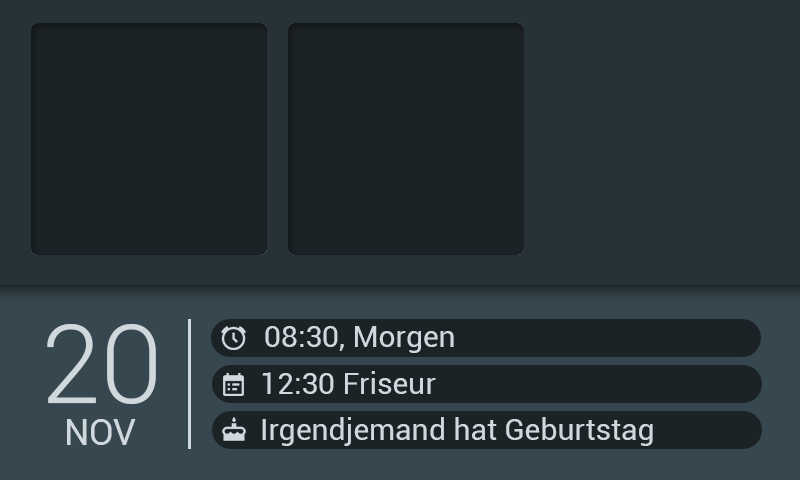
<style>
.page{position:relative;width:800px;height:480px;background:#1c2327}
.page>*{position:absolute;margin:0}
.t1{font:110px "Roboto-Light";color:#cfd8dc}
.t2{font:30px "Roboto-Regular";color:#cfd8dc}
.t3{font:36px "Roboto-Regular";color:#cfd8dc}
</style>
<div class="page">
<p class="t1" style="left:47px;top:324px;width:109px;height:80px">20</p>
<p class="t2" style="left:265px;top:326px;width:189px;height:27px">08:30, Morgen</p>
<p class="t2" style="left:262px;top:371px;width:174px;height:23px">12:30 Friseur</p>
<p class="t3" style="left:67px;top:419px;width:69px;height:26px">NOV</p>
<p class="t2" style="left:262px;top:417px;width:391px;height:29px">Irgendjemand hat Geburtstag</p>
</div>
